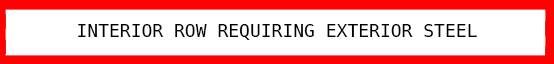
<style>
.page{position:relative;width:554px;height:64px;background:#ffffff}
.page>*{position:absolute;margin:0}
.t1{font:18px "Hack-Regular";color:#000000}
</style>
<div class="page">
<p class="t1" style="left:78px;top:24px;width:399px;height:16px">INTERIOR ROW REQUIRING EXTERIOR STEEL</p>
</div>
